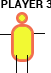
<style>
.page{position:relative;width:51px;height:73px;background:#ffffff}
.page>*{position:absolute;margin:0}
.t1{font:11px "Roboto-Bold";letter-spacing:0.025em;color:#000000}
</style>
<div class="page">
<p class="t1" style="left:1px;top:0px;width:52px;height:8px">PLAYER 3</p>
</div>
